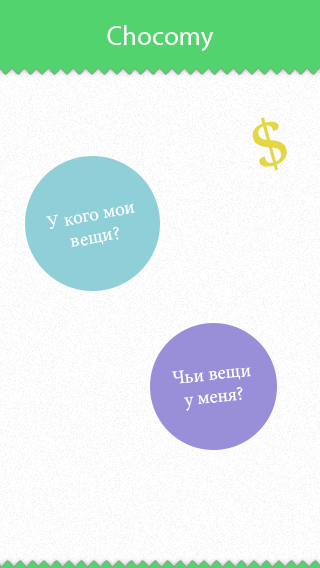
<style>
.page{position:relative;width:320px;height:568px;background:#ffffff}
.page>*{position:absolute;margin:0}
.t1{font:27px "MyriadPro-Regular";color:#fbfbfb}
.t2{font:87px "Nyala-Regular";color:#e4d743}
.t3{font:19px "MinionPro-Regular";color:#ffffff}
</style>
<div class="page">
<p class="t1" style="left:107px;top:25px;width:107px;height:26px">Chocomy</p>
<p class="t2" style="left:252px;top:117px;width:35px;height:54px;rotate:-15deg">$</p>
<p class="t3" style="left:46px;top:204px;width:89px;height:43px;rotate:-11deg">У кого мои вещи?</p>
<p class="t3" style="left:171px;top:367px;width:80px;height:44px;rotate:-6deg">Чьи вещи у меня?</p>
</div>
